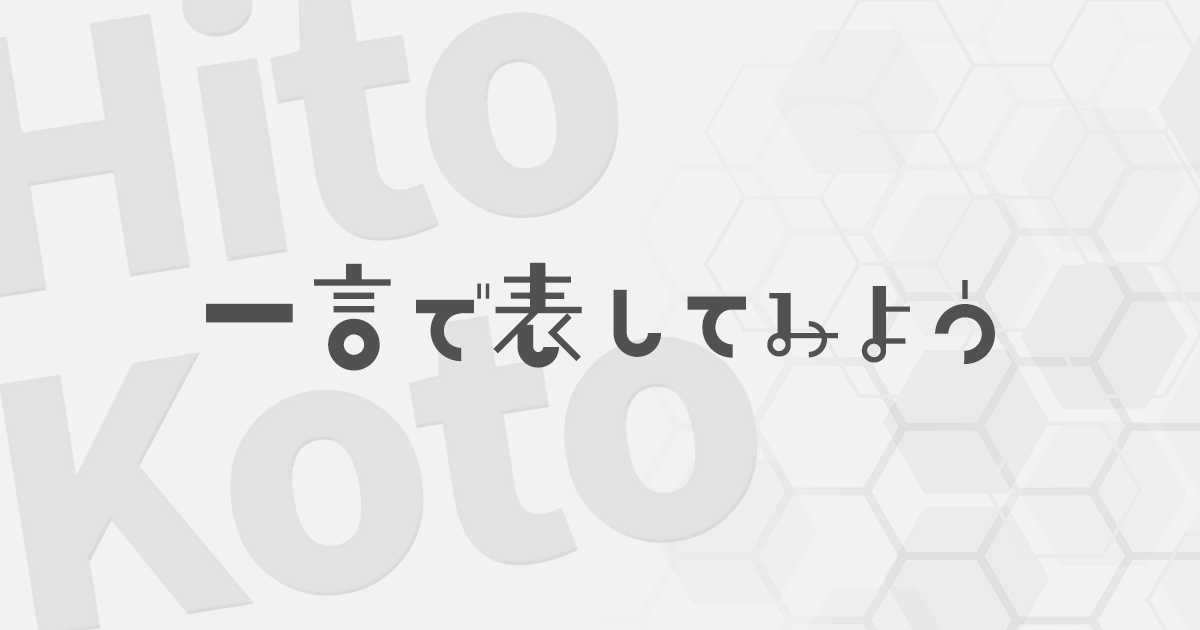
<style>
.page{position:relative;width:1200px;height:630px;background:#f2f2f2}
.page>*{position:absolute;margin:0}
.t1{font:115.3px "AB-kotsubu";letter-spacing:-0.28em;color:#515151}
.t2{font:135.9px "AB-kotsubu";letter-spacing:-0.28em;color:#515151}
</style>
<div class="page">
<p class="t1" style="left:206px;top:262px;width:789px;height:109px"><span class="t2">一言</span>で<span class="t2">表</span>してみよう</p>
</div>
